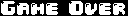
<style>
.page{position:relative;width:128px;height:16px;background:#000000}
.page>*{position:absolute;margin:0}
.t1{font:17px "04b30";color:#ffffff}
</style>
<div class="page">
<p class="t1" style="left:1px;top:1px;width:124px;height:14px">Game Over</p>
</div>
